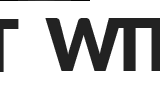
<style>
.page{position:relative;width:160px;height:90px;background:#ffffff}
.page>*{position:absolute;margin:0}
.t1{font:72px "Lato-Black"}
.t2{font:72px "Lato-Black";color:#222222}
</style>
<div class="page">
<p class="t1" style="left:13px;top:18px;width:77px;height:53px">W</p>
<p class="t2" style="left:104px;top:18px;width:43px;height:53px">T</p>
</div>
